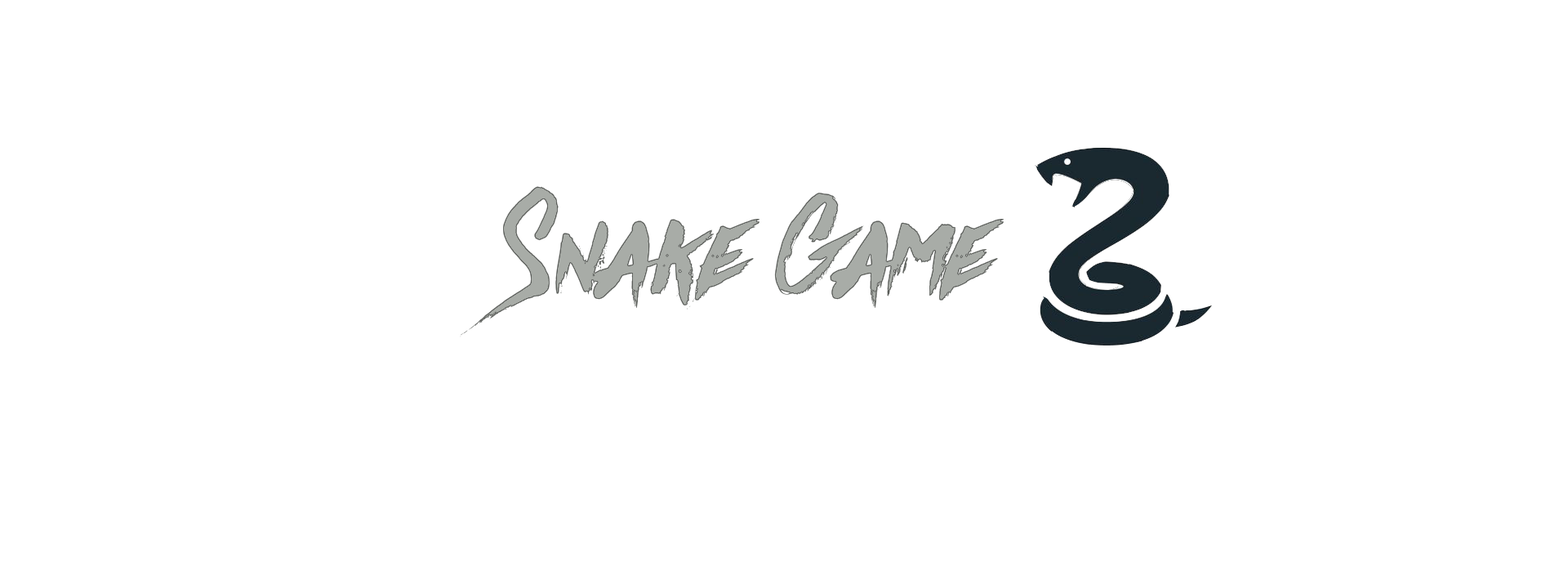
<style>
.page{position:relative;width:1568px;height:588px;background:#ffffff}
.page>*{position:absolute;margin:0}
.t1{font:138.8px "Againts";color:#a8aca7}
</style>
<div class="page">
<p class="t1" style="left:460px;top:186px;width:544px;height:151px">Snake Game</p>
<p class="t1" style="left:460px;top:186px;width:544px;height:151px">Snake Game</p>
</div>
